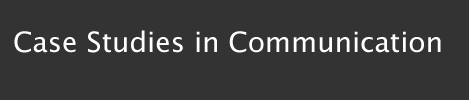
<style>
.page{position:relative;width:469px;height:100px;background:#333333}
.page>*{position:absolute;margin:0}
.t1{font:28px "LucidaGrande";color:#ffffff}
</style>
<div class="page">
<p class="t1" style="left:14px;top:30px;width:427px;height:23px">Case Studies in Communication</p>
</div>
